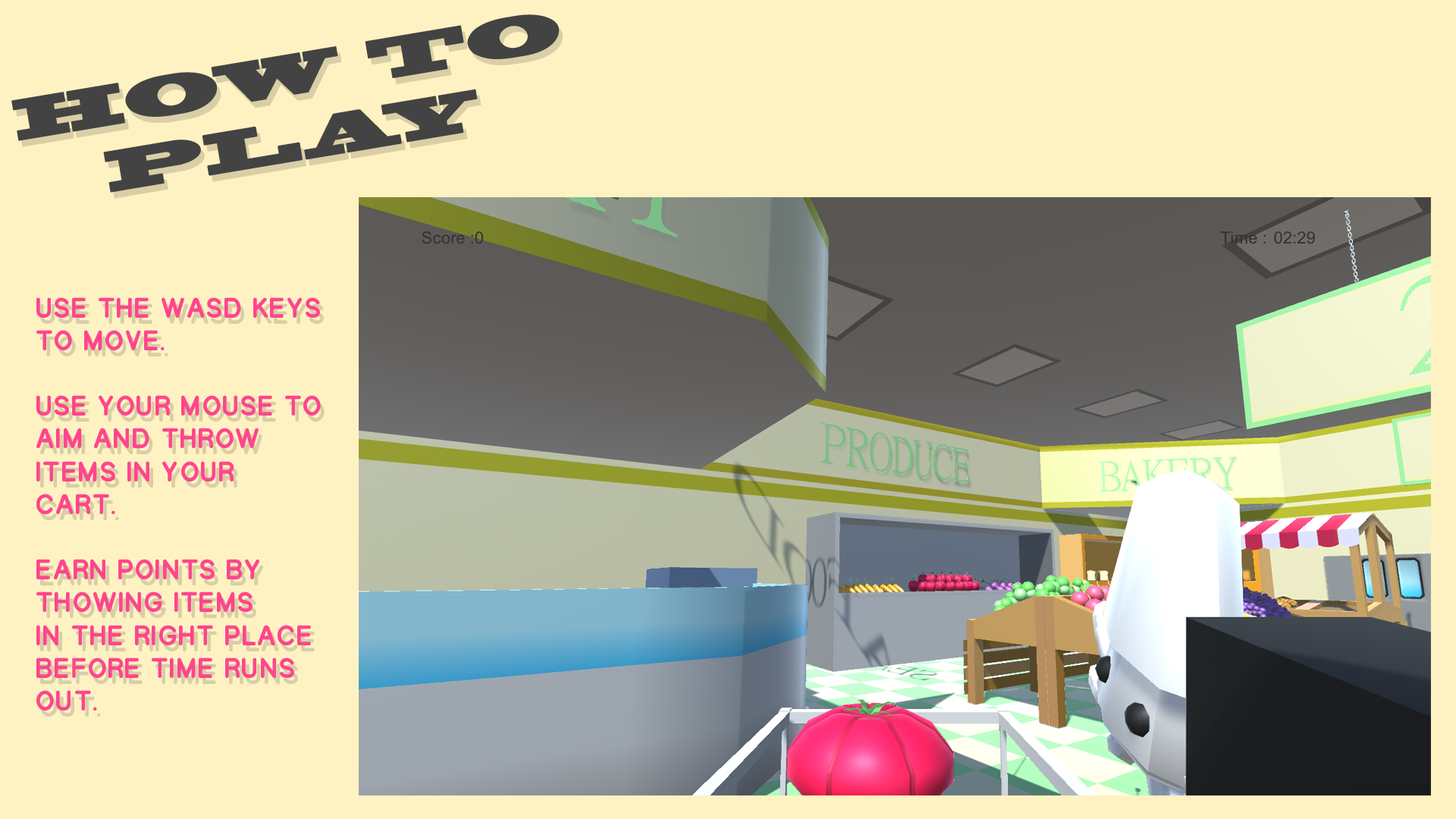
<style>
.page{position:relative;width:1456px;height:819px;background:#fff2c2}
.page>*{position:absolute;margin:0}
.t1{font:54.6px "BlackoakStd";color:#434343}
.t2{font:27.3px "Cherry-Regular";color:#ff458e}
</style>
<div class="page">
<p class="t1" style="left:11px;top:14px;width:549px;height:179px;rotate:-10deg">HOW TO <br>   PLAY</p>
<p class="t2" style="left:36px;top:297px;width:285px;height:414px">USE tHE WASD KEYS to move. <br><br>USE your MOUSE TO AIM AND THROW ITEMS IN YOUR CART.<br><br>Earn Points by thowing items<br>in the right place <br>before time runs out.</p>
</div>
